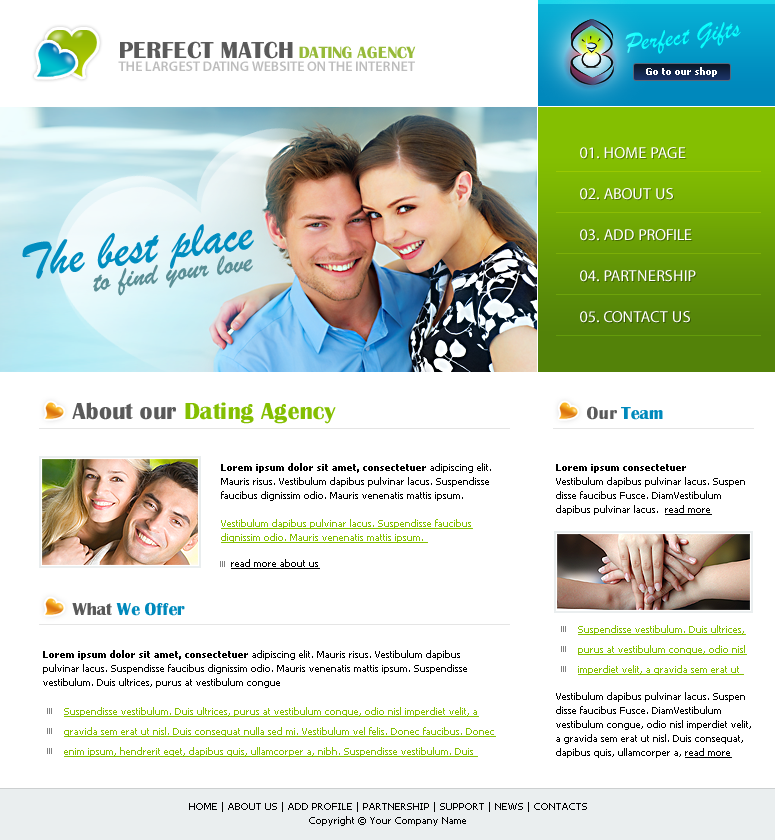
<style>
.page{position:relative;width:775px;height:840px;background:#ffffff}
.page>*{position:absolute;margin:0}
.t1{font:27px "BrushScriptMT";color:#0affff}
.t2{font:24px "BritannicBold";color:#5a5a5a;text-transform:uppercase}
.t3{font:17px "BritannicBold";color:#97ba3a;text-transform:uppercase}
.t4{font:14px "MyriadPro-Semibold";color:#bdbdbd;text-transform:uppercase}
.t5{font:10px "Tahoma-Bold";color:#ffffff}
.t6{font:16px "MyriadPro-Regular";color:#ffffff;text-transform:uppercase}
.t7{font:51px "BrushScriptMT";color:#018dbf}
.t8{font:31px "BrushScriptMT";color:#5a8e95}
.t9{font:24px "BritannicBold";color:#84bf01}
.t10{font:24px "BritannicBold";color:#5a5a5a}
.t11{font:18px "BritannicBold";color:#0089bc}
.t12{font:18px "BritannicBold";color:#5a5a5a}
.t13{font:10px/14px "Tahoma";color:#000000}
.t14{font:10px/14px "Tahoma-Bold";color:#000000}
.t15{font:10px/14px "Tahoma";color:#000000;text-decoration:underline}
.t16{font:10px/14px "Tahoma";color:#84bf01;text-decoration:underline}
.t17{font:10px "Tahoma";color:#000000;text-decoration:underline}
.t18{font:10px/20px "Tahoma";color:#84bf01;text-decoration:underline}
</style>
<div class="page">
<p class="t1" style="left:625px;top:22px;width:116px;height:32px;rotate:-7deg">Perfect Gifts</p>
<p class="t2" style="left:120px;top:41px;width:173px;height:18px">perfect match</p>
<p class="t3" style="left:299px;top:46px;width:117px;height:13px">DATING AGENCY</p>
<p class="t4" style="left:118px;top:61px;width:297px;height:10px">THE LARGEST DATING WEBSITE ON THE INTERNET</p>
<p class="t5" style="left:646px;top:67px;width:71px;height:10px">Go to our shop</p>
<p class="t6" style="left:580px;top:147px;width:106px;height:12px">01. HOME PAGE</p>
<p class="t6" style="left:580px;top:188px;width:93px;height:12px">02. ABOUT US</p>
<p class="t7" style="left:22px;top:224px;width:232px;height:55px;rotate:-7deg">The best place</p>
<p class="t6" style="left:580px;top:229px;width:112px;height:12px">03. ADD PROFILE</p>
<p class="t8" style="left:93px;top:255px;width:160px;height:41px;rotate:-7deg">to find your love</p>
<p class="t6" style="left:580px;top:270px;width:116px;height:12px">04. PARTNERSHIP</p>
<p class="t6" style="left:580px;top:311px;width:110px;height:12px">05. CONTACT US</p>
<p class="t9" style="left:72px;top:402px;width:264px;height:22px"><span class="t10">About our </span>Dating Agency</p>
<p class="t11" style="left:587px;top:406px;width:76px;height:14px"><span class="t12">Our </span>Team</p>
<p class="t13" style="left:221px;top:463px;width:270px;height:38px"><span class="t14">Lorem ipsum dolor sit amet, consectetuer</span> adipiscing elit. Mauris risus. Vestibulum dapibus pulvinar lacus. Suspendisse faucibus dignissim odio. Mauris venenatis mattis ipsum.</p>
<p class="t13" style="left:556px;top:464px;width:189px;height:51px"><span class="t14">Lorem ipsum consectetuer</span> <br>Vestibulum dapibus pulvinar lacus. Suspen disse faucibus Fusce. DiamVestibulum dapibus pulvinar lacus.  <span class="t15">read more</span></p>
<p class="t16" style="left:221px;top:519px;width:252px;height:24px">Vestibulum dapibus pulvinar lacus. Suspendisse faucibus dignissim odio. Mauris venenatis mattis ipsum.</p>
<p class="t17" style="left:231px;top:559px;width:89px;height:10px">read more about us</p>
<p class="t11" style="left:72px;top:602px;width:113px;height:14px"><span class="t12">What </span>We Offer</p>
<p class="t18" style="left:578px;top:625px;width:169px;height:50px">Suspendisse vestibulum. Duis ultrices, purus at vestibulum congue, odio nisl imperdiet velit, a gravida sem erat ut</p>
<p class="t13" style="left:43px;top:650px;width:424px;height:38px"><span class="t14">Lorem ipsum dolor sit amet, consectetuer</span> adipiscing elit. Mauris risus. Vestibulum dapibus pulvinar lacus. Suspendisse faucibus dignissim odio. Mauris venenatis mattis ipsum. Suspendisse vestibulum. Duis ultrices, purus at vestibulum congue</p>
<p class="t13" style="left:556px;top:692px;width:195px;height:66px">Vestibulum dapibus pulvinar lacus. Suspen disse faucibus Fusce. DiamVestibulum vestibulum congue, odio nisl imperdiet velit, a gravida sem erat ut nisl. Duis consequat, dapibus quis, ullamcorper a, <span class="t15">read more</span></p>
<p class="t18" style="left:64px;top:707px;width:432px;height:50px">Suspendisse vestibulum. Duis ultrices, purus at vestibulum congue, odio nisl imperdiet velit, a gravida sem erat ut nisl. Duis consequat nulla sed mi. Vestibulum vel felis. Donec faucibus. Donec enim ipsum, hendrerit eget, dapibus quis, ullamcorper a, nibh. Suspendisse vestibulum. Duis</p>
<p class="t13" style="left:189px;top:802px;width:398px;height:24px;text-align:center">HOME | ABOUT US | ADD PROFILE | PARTNERSHIP | SUPPORT | NEWS | CONTACTS<br>Copyright © Your Company Name</p>
</div>
